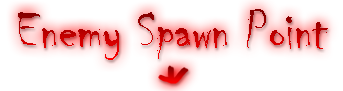
<style>
.page{position:relative;width:343px;height:91px;background:#ffffff}
.page>*{position:absolute;margin:0}
.t1{font:55.2px "Chiller-Regular"}
</style>
<div class="page">
<p class="t1" style="left:18px;top:9px;width:310px;height:51px">Enemy Spawn Point</p>
</div>
